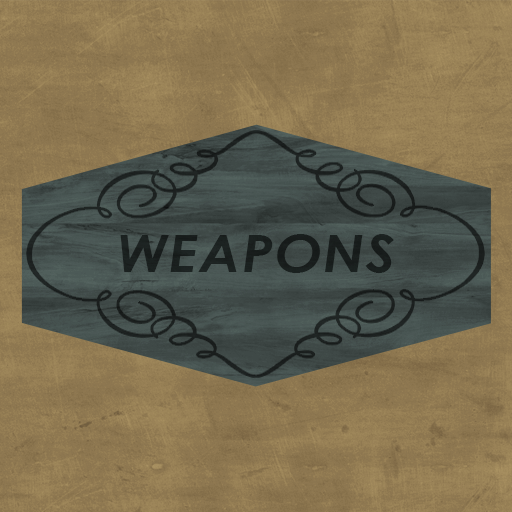
<style>
.page{position:relative;width:512px;height:512px}
.page>*{position:absolute;margin:0}
.t1{font:52px "CenturyGothic-BoldItalic";letter-spacing:0.025em;color:#1a201f;text-transform:uppercase;scale:1.07 1}
</style>
<div class="page">
<p class="t1" style="left:120px;top:234px;width:274px;height:39px">weapons</p>
</div>
